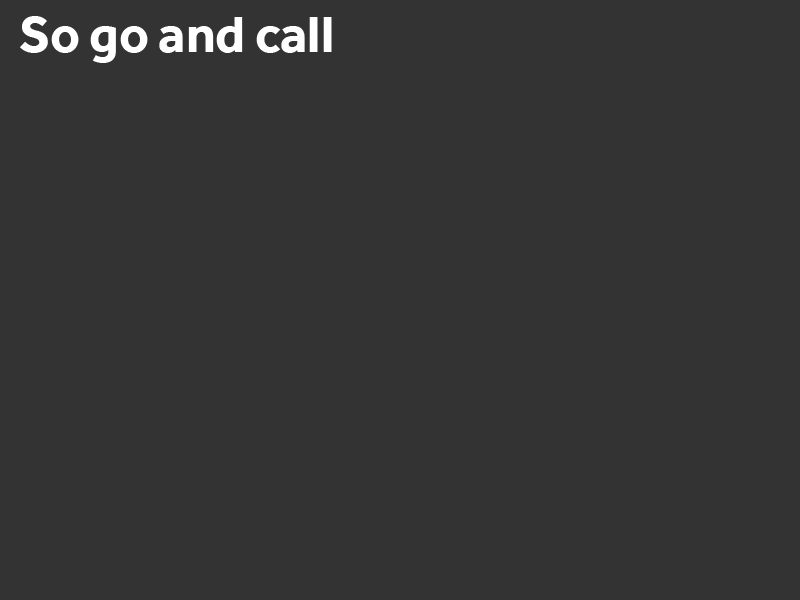
<style>
.page{position:relative;width:800px;height:600px;background:#333333}
.page>*{position:absolute;margin:0}
.t1{font:52.7px "Effra-Bold";color:#ffffff}
</style>
<div class="page">
<p class="t1" style="left:20px;top:16px;width:312px;height:47px">So go and call</p>
</div>
